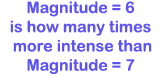
<style>
.page{position:relative;width:160px;height:75px;background:#ffffff}
.page>*{position:absolute;margin:0}
.t1{font:16px "ArialRoundedMTBold";color:#5f54f1}
</style>
<div class="page">
<p class="t1" style="left:10px;top:1px;width:142px;height:73px;text-align:center">Magnitude = 6<br>is how many times<br> more intense than<br>Magnitude = 7</p>
</div>
